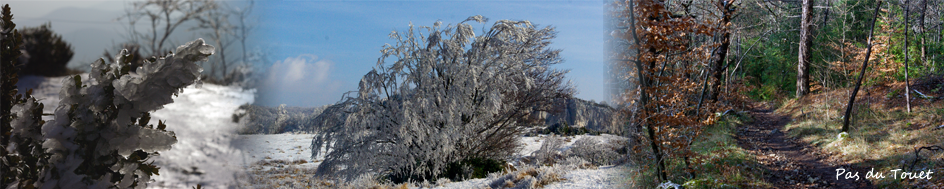
<style>
.page{position:relative;width:944px;height:189px}
.page>*{position:absolute;margin:0}
.t1{font:14px "SegoeScript";color:#ffffff}
</style>
<div class="page">
<p class="t1" style="left:835px;top:167px;width:99px;height:14px">Pas du Touet</p>
</div>
